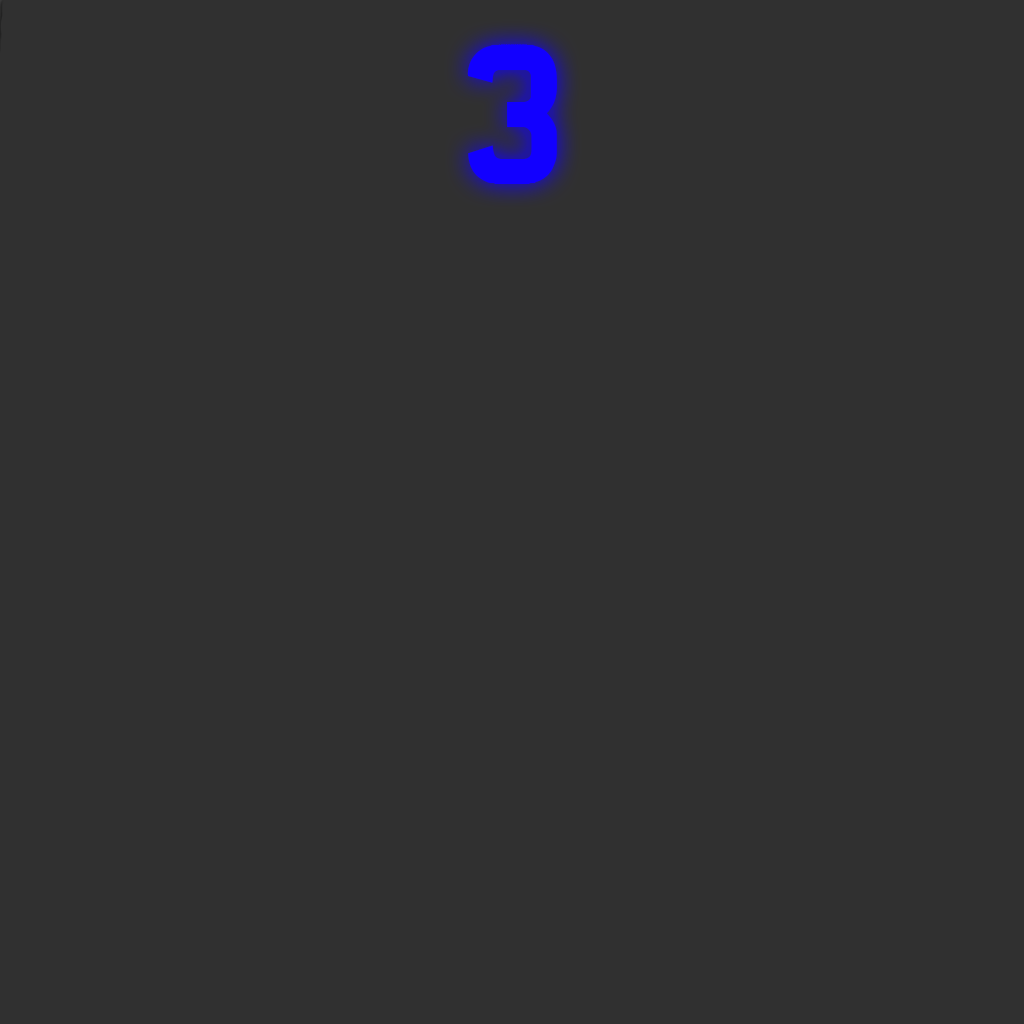
<style>
.page{position:relative;width:1024px;height:1024px;background:#303030}
.page>*{position:absolute;margin:0}
.t1{font:203.8px "UKNumberPlate";color:#1200ff}
</style>
<div class="page">
<p class="t1" style="left:467px;top:43px;width:90px;height:141px">3</p>
</div>
